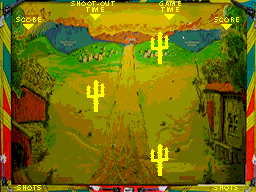
<style>
.page{position:relative;width:256px;height:192px}
.page>*{position:absolute;margin:0}
.t1{font:6.6px/6px "AcuminConcept-Bold";letter-spacing:0.1em;color:#ffff00;font-weight:bold}
.t2{font:6.6px "AcuminConcept-Bold";letter-spacing:0.1em;color:#ffff00;font-weight:bold}
</style>
<div class="page">
<p class="t1" style="left:71px;top:1px;width:44px;height:11px">SHOOT-OUT<br>TIME</p>
<p class="t1" style="left:159px;top:1px;width:22px;height:11px;text-align:center">GAME<br>TIME</p>
<p class="t2" style="left:16px;top:17px;width:25px;height:5px">SCORE</p>
<p class="t2" style="left:214px;top:17px;width:25px;height:5px">SCORE</p>
<p class="t2" style="left:17px;top:185px;width:24px;height:5px">SHOTS</p>
<p class="t2" style="left:214px;top:185px;width:24px;height:5px">SHOTS</p>
</div>
